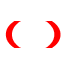
<style>
.page{position:relative;width:64px;height:64px;background:#ffffff}
.page>*{position:absolute;margin:0}
.t1{font:43.8px "MoolBoran";color:#ff0000;scale:1.89 1}
</style>
<div class="page">
<p class="t1" style="left:5px;top:21px;width:56px;height:27px">(  )</p>
</div>
